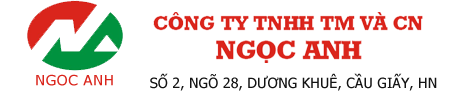
<style>
.page{position:relative;width:463px;height:106px;background:#ffffff}
.page>*{position:absolute;margin:0}
.t1{font:14.4px "MSReferenceSansSerif";color:#da251c}
.t2{font:14.4px "Tahoma";color:#141414}
</style>
<div class="page">
<p class="t1" style="left:36px;top:74px;width:77px;height:12px">NGOC ANH</p>
<p class="t2" style="left:150px;top:73px;width:287px;height:18px">SỐ 2, NGÕ 28, DƯƠNG KHUÊ, CẦU GIẤY, HN</p>
</div>
